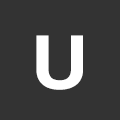
<style>
.page{position:relative;width:120px;height:120px;background:#333333}
.page>*{position:absolute;margin:0}
.t1{font:75px "OpenSans-Bold";color:#ffffff;scale:1.06 1}
</style>
<div class="page">
<p class="t1" style="left:36px;top:35px;width:47px;height:55px">U</p>
</div>
